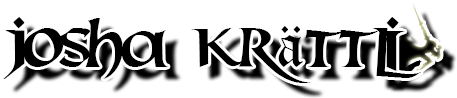
<style>
.page{position:relative;width:457px;height:98px;background:#ffffff}
.page>*{position:absolute;margin:0}
.t1{font:60px "Mael";color:#000000}
.t2{font:60px "OldEnglishTextMT";color:#000000}
</style>
<div class="page">
<p class="t1" style="left:3px;top:17px;width:418px;height:66px">Josha Kr<span class="t2">a</span>ttli</p>
</div>
